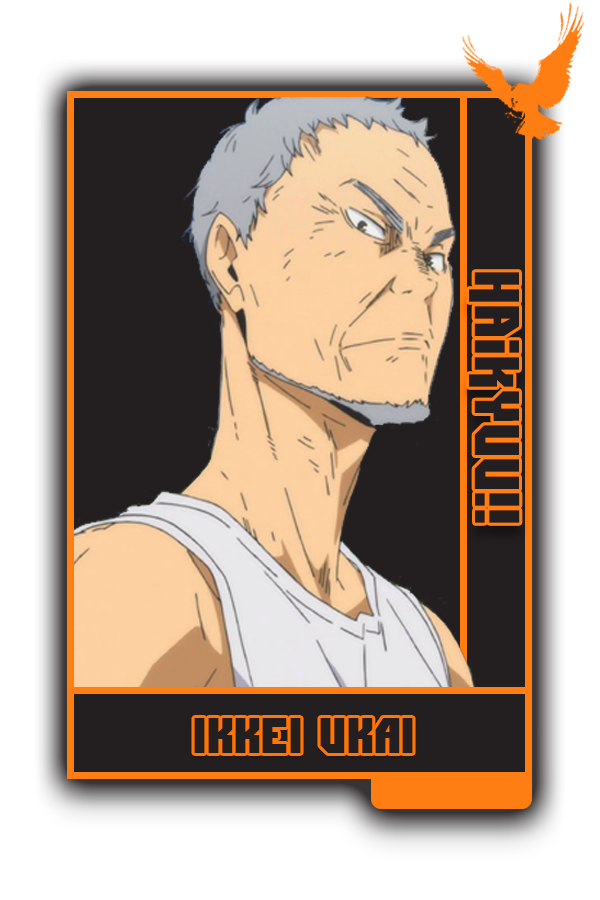
<style>
.page{position:relative;width:600px;height:900px;background:#231e1f}
.page>*{position:absolute;margin:0}
.t1{font:62.9px "Dimitri";color:#231f20}
.t2{font:50.5px "Dimitri";color:#231f20}
</style>
<div class="page">
<p class="t1" style="left:469px;top:272px;width:51px;height:251px;rotate:90deg">Haikyuu!!</p>
<p class="t2" style="left:194px;top:718px;width:219px;height:35px">IKKEI UKAI</p>
</div>
